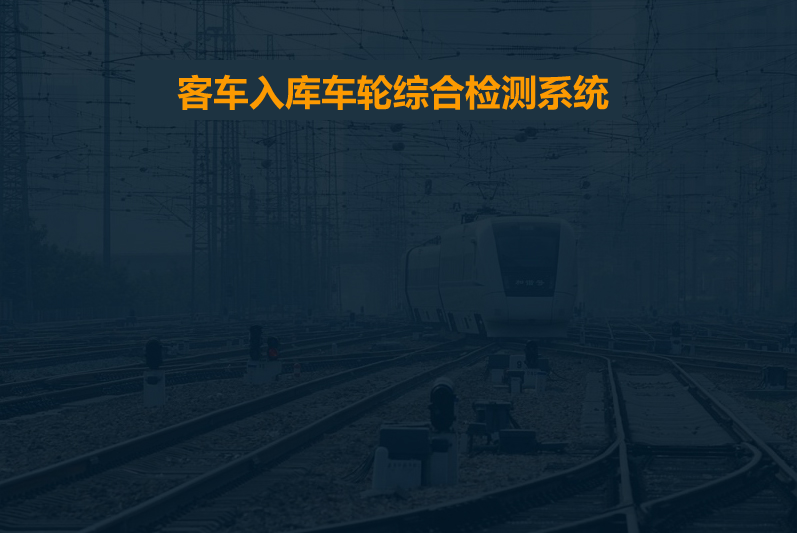
<style>
.page{position:relative;width:797px;height:533px}
.page>*{position:absolute;margin:0}
.t1{font:36px "MicrosoftYaHei-Bold";color:#fc9a01}
</style>
<div class="page">
<p class="t1" style="left:177px;top:74px;width:432px;height:36px">客车入库车轮综合检测系统</p>
</div>
